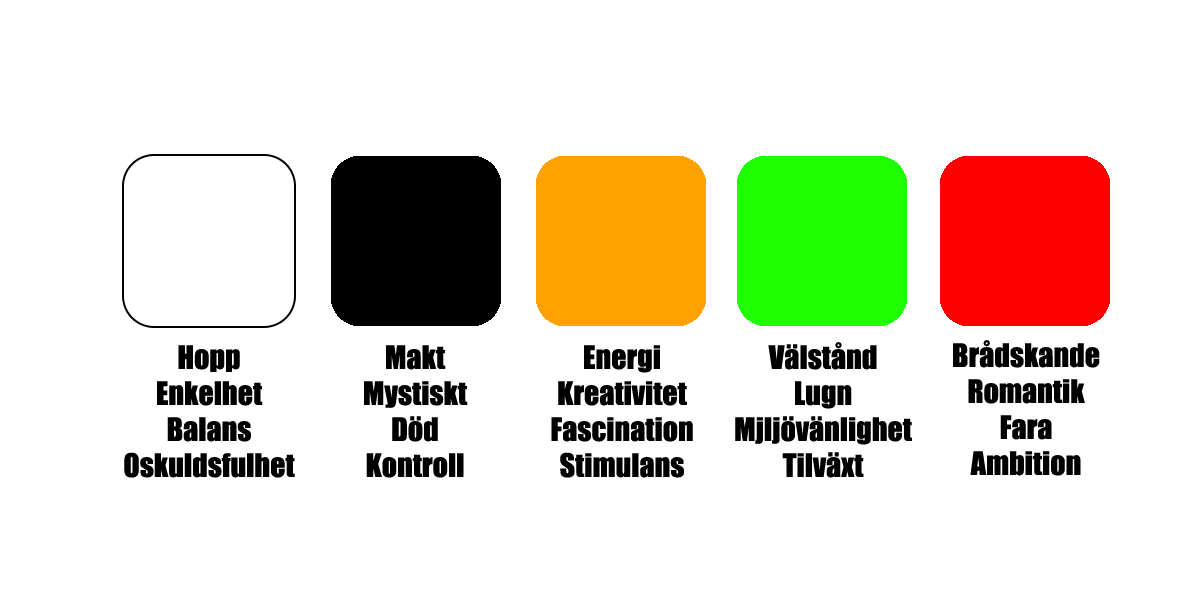
<style>
.page{position:relative;width:1200px;height:600px;background:#ffffff}
.page>*{position:absolute;margin:0}
.t1{font:30px "Impact";color:#000000}
</style>
<div class="page">
<p class="t1" style="left:735px;top:342px;width:177px;height:136px;text-align:center">Välstånd<br>Lugn<br>Mjljövänlighet<br>Tilväxt</p>
<p class="t1" style="left:953px;top:340px;width:147px;height:136px;text-align:center">Brådskande<br>Romantik<br>Fara<br>Ambition</p>
<p class="t1" style="left:124px;top:345px;width:171px;height:133px;text-align:center">Hopp<br>Enkelhet<br>Balans<br>Oskuldsfulhet</p>
<p class="t1" style="left:364px;top:345px;width:104px;height:133px;text-align:center">Makt<br>Mystiskt<br>Död<br>Kontroll</p>
<p class="t1" style="left:551px;top:345px;width:142px;height:133px;text-align:center">Energi<br>Kreativitet<br>Fascination<br>Stimulans</p>
</div>
